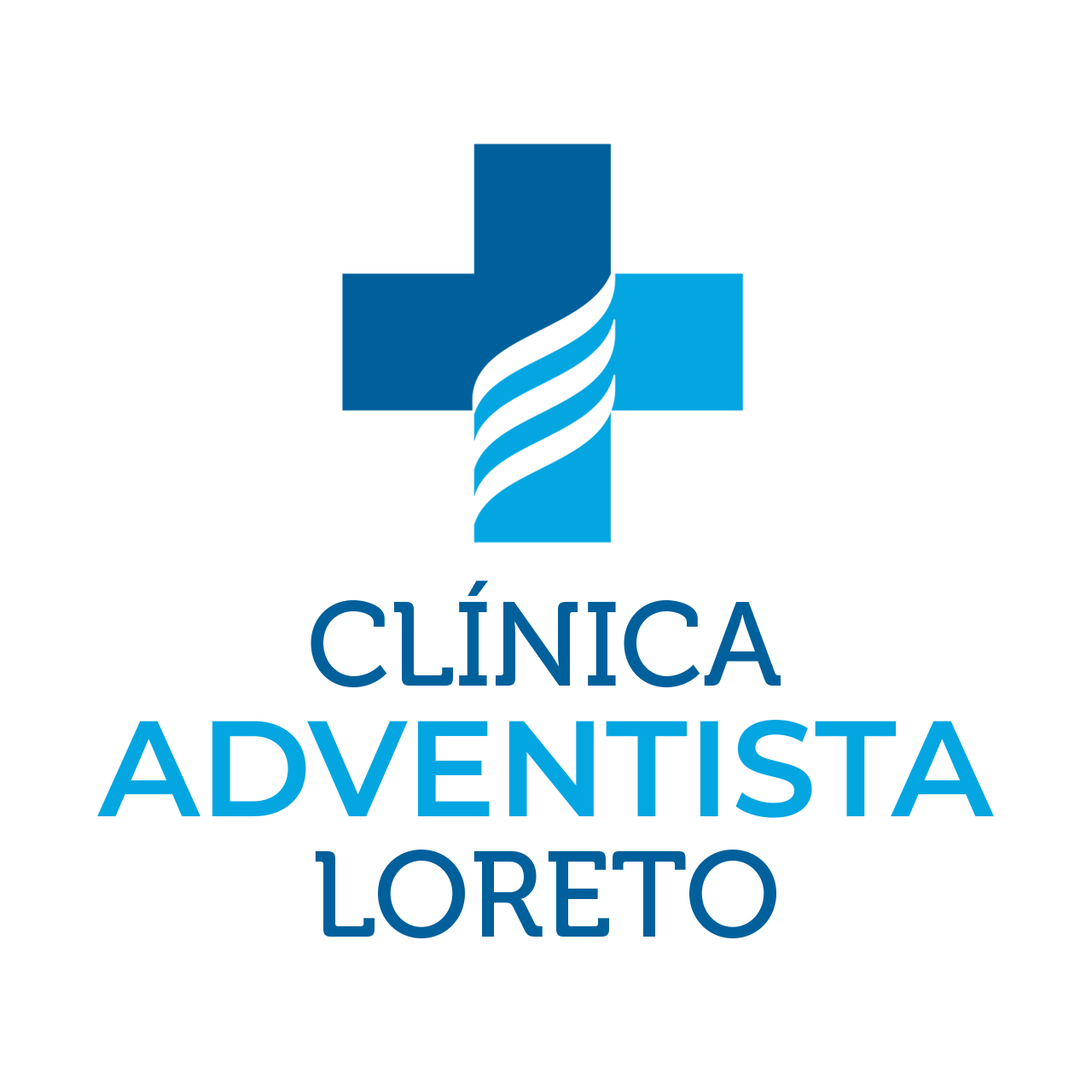
<style>
.page{position:relative;width:1092px;height:1092px;background:#ffffff}
.page>*{position:absolute;margin:0}
.t1{font:118.5px "Museo-500";color:#00609c;text-transform:uppercase}
.t2{font:135.7px "Montserrat-SemiBold";color:#04a6e1;text-transform:uppercase}
.t3{font:120.4px "Museo-500";color:#00609c;text-transform:uppercase}
</style>
<div class="page">
<p class="t1" style="left:311px;top:580px;width:470px;height:107px">CLÍNICA</p>
<p class="t2" style="left:97px;top:719px;width:897px;height:99px">ADVENTISTA</p>
<p class="t3" style="left:315px;top:849px;width:462px;height:89px">Loreto</p>
</div>
